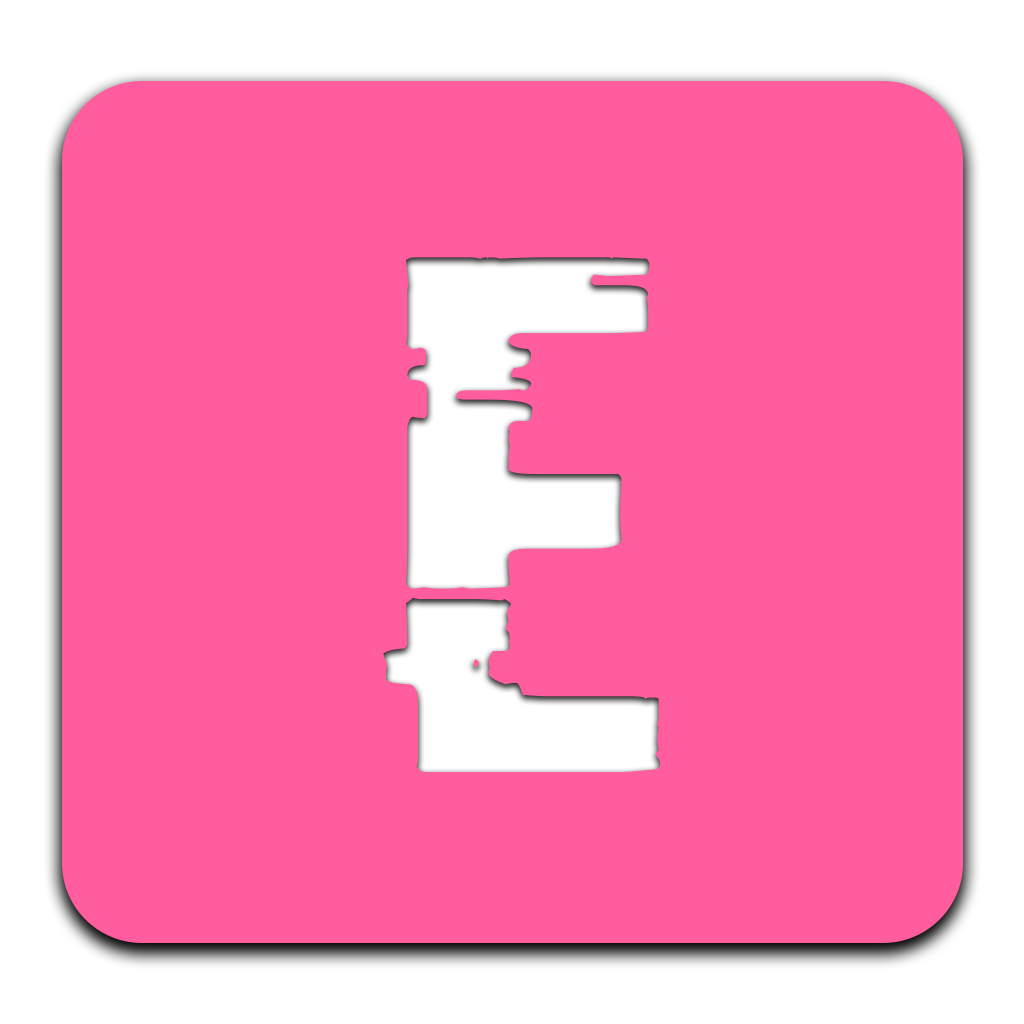
<style>
.page{position:relative;width:1024px;height:1024px;background:#ff5d9e}
.page>*{position:absolute;margin:0}
.t1{font:681.2px "BadSignal";color:#ffffff}
</style>
<div class="page">
<p class="t1" style="left:383px;top:257px;width:278px;height:516px">E</p>
</div>
